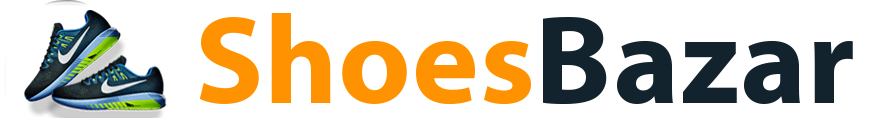
<style>
.page{position:relative;width:874px;height:118px;background:#ffffff}
.page>*{position:absolute;margin:0}
.t1{font:126.4px "MyriadPro-Bold";letter-spacing:0.005em;color:#ff9201}
.t2{font:126.4px "MyriadPro-Bold";letter-spacing:0.005em;color:#13232d}
</style>
<div class="page">
<p class="t1" style="left:199px;top:13px;width:654px;height:92px">Shoes<span class="t2">Bazar</span></p>
</div>
